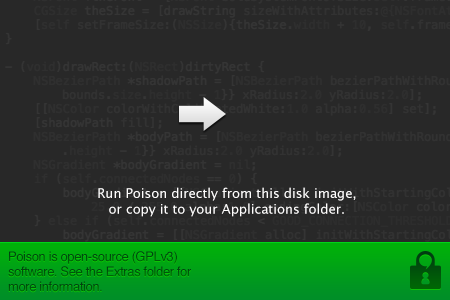
<style>
.page{position:relative;width:450px;height:300px;background:#282828}
.page>*{position:absolute;margin:0}
.t1{font:13px "LucidaGrande";color:#fffefe}
.t2{font:13px "Helvetica";letter-spacing:-0.03em;color:#004f0b}
.t3{font:13px "Helvetica";letter-spacing:-0.03em;color:#005709}
.t4{font:13px "Helvetica";letter-spacing:-0.03em;color:#00540a}
</style>
<div class="page">
<p class="t1" style="left:98px;top:187px;width:258px;height:30px;text-align:center">Run Poison directly from this disk image,<br>or copy it to your Applications folder.</p>
<p class="t2" style="left:9px;top:251px;width:168px;height:13px">Poison is open-source (GPLv3)</p>
<p class="t3" style="left:8px;top:266px;width:183px;height:11px">software. See the Extras folder for</p>
<p class="t4" style="left:8px;top:281px;width:94px;height:11px">more information.</p>
</div>
